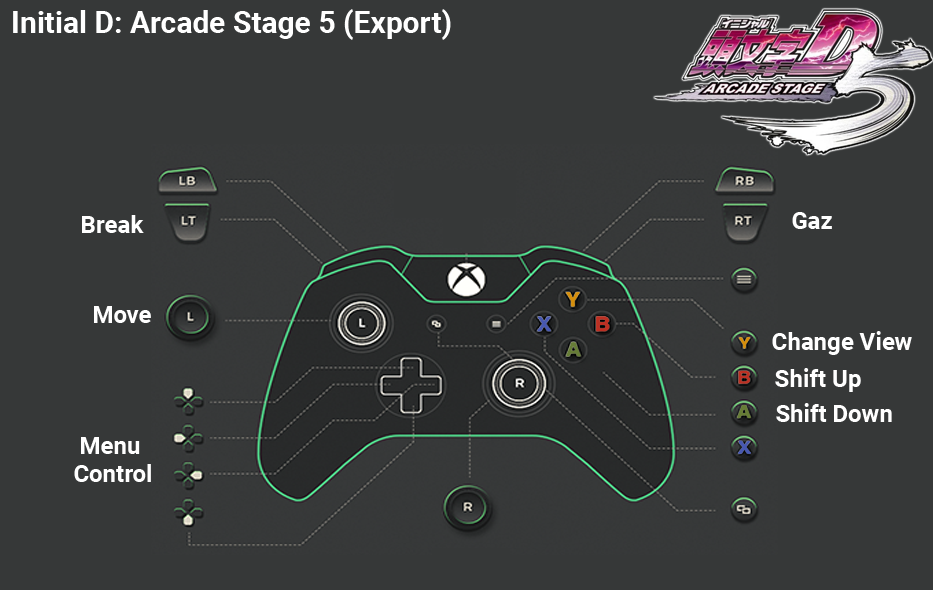
<style>
.page{position:relative;width:933px;height:590px;background:#363838}
.page>*{position:absolute;margin:0}
.t1{font:30px "Roboto-Bold";color:#ffffff}
.t2{font:24px "Roboto-Bold";color:#ffffff}
.t3{font:24px/28px "Roboto-Bold";color:#ffffff}
</style>
<div class="page">
<p class="t1" style="left:13px;top:9px;width:438px;height:31px">Initial D: Arcade Stage 5 (Export)</p>
<p class="t2" style="left:82px;top:215px;width:62px;height:18px">Break</p>
<p class="t2" style="left:792px;top:212px;width:40px;height:17px">Gaz</p>
<p class="t2" style="left:94px;top:306px;width:57px;height:17px">Move</p>
<p class="t2" style="left:772px;top:331px;width:140px;height:24px">Change View</p>
<p class="t2" style="left:775px;top:368px;width:86px;height:24px">Shift Up</p>
<p class="t2" style="left:776px;top:403px;width:116px;height:19px">Shift Down</p>
<p class="t3" style="left:74px;top:437px;width:77px;height:45px;text-align:center">Menu <br>Control</p>
</div>
